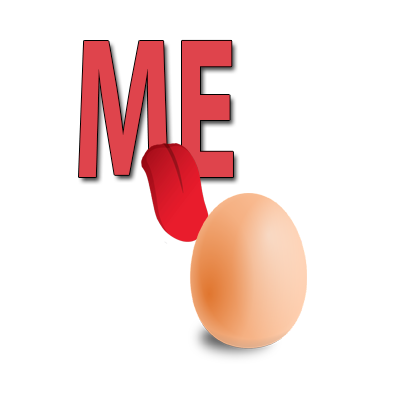
<style>
.page{position:relative;width:400px;height:400px;background:#ffffff}
.page>*{position:absolute;margin:0}
.t1{font:201.5px "MyriadPro-Bold";color:#df444c;scale:0.59 1}
</style>
<div class="page">
<p class="t1" style="left:79px;top:40px;width:154px;height:137px">ME</p>
</div>
